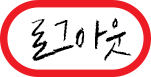
<style>
.page{position:relative;width:151px;height:77px;background:#ffffff}
.page>*{position:absolute;margin:0}
.t1{font:55.1px "SDGongPil-aMd";letter-spacing:-0.06em;color:#000000}
</style>
<div class="page">
<p class="t1" style="left:31px;top:17px;width:101px;height:44px">로그아웃</p>
</div>
